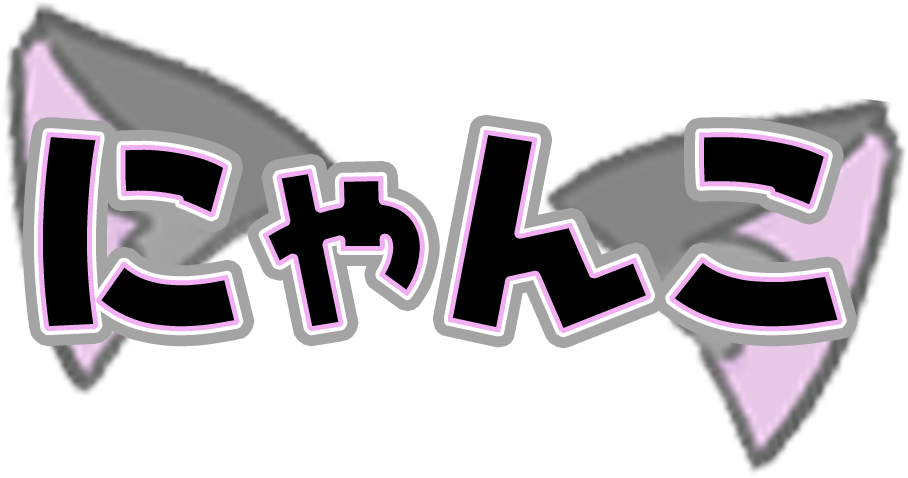
<style>
.page{position:relative;width:908px;height:478px;background:#ffffff}
.page>*{position:absolute;margin:0}
.t1{font:200px "haramase_nyanko";color:#000000;font-weight:bold}
</style>
<div class="page">
<p class="t1" style="left:38px;top:130px;width:805px;height:204px">にゃんこ</p>
</div>
